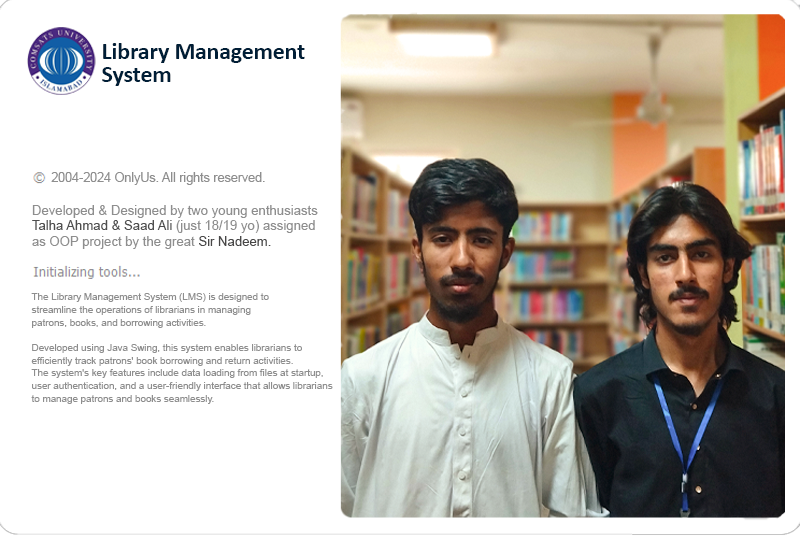
<style>
.page{position:relative;width:800px;height:536px;background:#ffffff}
.page>*{position:absolute;margin:0}
.t1{font:23.5px/22.4px "Calibri-Bold";color:#001e36}
.t2{font:12.5px "ArialMT";color:#8e8e8e}
.t3{font:13.1px/15.7px "ArialMT";color:#8e8e8e}
.t4{font:13.1px/15.7px "ArialMT";color:#4e4e4e}
.t5{font:13.1px/15.7px "ArialMT";color:#484747}
.t6{font:9.8px/12.7px "ArialMT";color:#8e8e8e}
</style>
<div class="page">
<p class="t1" style="left:102px;top:43px;width:203px;height:43px">Library Management<br>System</p>
<p class="t2" style="left:51px;top:172px;width:214px;height:13px">2004-2024 OnlyUs. All rights reserved.</p>
<p class="t3" style="left:32px;top:205px;width:286px;height:44px">Developed &amp; Designed by two young enthusiasts<br><span class="t4">Talha Ahmad &amp; Saad Ali</span> (just 18/19 yo) assigned<br>as OOP project by the great <span class="t5">Sir Nadeem.</span></p>
<p class="t6" style="left:31px;top:293px;width:302px;height:111px">The Library Management System (LMS) is designed to<br>streamline the operations of librarians in managing<br>patrons, books, and borrowing activities.<br><br>Developed using Java Swing, this system enables librarians to <br>efficiently track patrons' book borrowing and return activities. <br>The system's key features include data loading from files at startup,<br>user authentication, and a user-friendly interface that allows librarians<br>to manage patrons and books seamlessly.</p>
</div>
